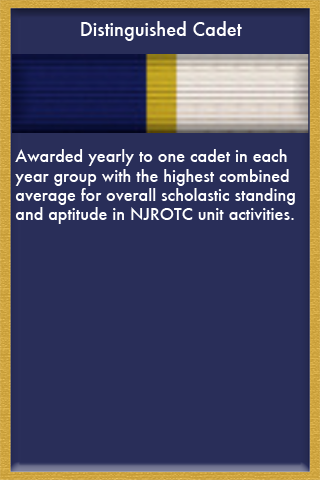
<style>
.page{position:relative;width:320px;height:480px;background:#292e59}
.page>*{position:absolute;margin:0}
.t1{font:18px "Futura-Medium";color:#ffffff}
.t2{font:16px "Futura-Medium";color:#ffffff}
</style>
<div class="page">
<p class="t1" style="left:81px;top:21px;width:161px;height:20px">Distinguished Cadet</p>
<p class="t2" style="left:15px;top:149px;width:280px;height:75px">Awarded yearly to one cadet in each <br>year group with the highest combined <br>average for overall scholastic standing <br>and aptitude in NJROTC unit activities.</p>
</div>
